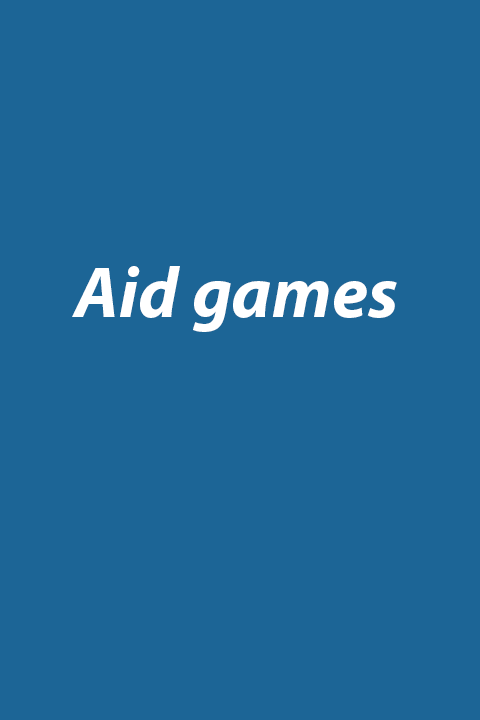
<style>
.page{position:relative;width:480px;height:720px;background:#1c6596}
.page>*{position:absolute;margin:0}
.t1{font:72px "MyriadPro-BoldIt";color:#ffffff}
</style>
<div class="page">
<p class="t1" style="left:72px;top:266px;width:325px;height:66px">Aid games</p>
</div>
